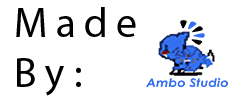
<style>
.page{position:relative;width:250px;height:105px;background:#ffffff}
.page>*{position:absolute;margin:0}
.t1{font:41.7px "MyriadPro-Regular";letter-spacing:0.2em;color:#000000}
</style>
<div class="page">
<p class="t1" style="left:16px;top:7px;width:120px;height:89px">Made<br>By:</p>
</div>
